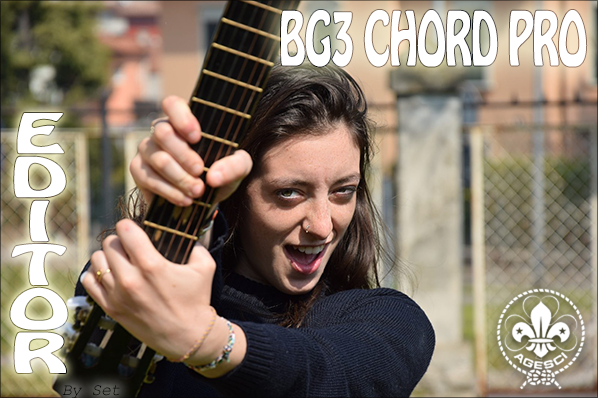
<style>
.page{position:relative;width:598px;height:398px}
.page>*{position:absolute;margin:0}
.t1{font:15.7px "HoboStd";letter-spacing:-0.025em;color:#ffffff;scale:0.62 1}
.t2{font:11.6px "HoboStd";letter-spacing:-0.025em;color:#ffffff;scale:1.78 1}
.t3{font:16.7px "CourierNewPS-ItalicMT";color:#000000}
</style>
<div class="page">
<p class="t1" style="left:281px;top:10px;width:306px;height:57px;text-align:justify">BG3 CHORD PRO</p>
<p class="t2" style="left:10px;top:113px;width:58px;height:260px;text-align:center">E<br>D<br>I<br>T<br>O<br>R</p>
<p class="t3" style="left:62px;top:385px;width:58px;height:14px">By Set</p>
</div>
